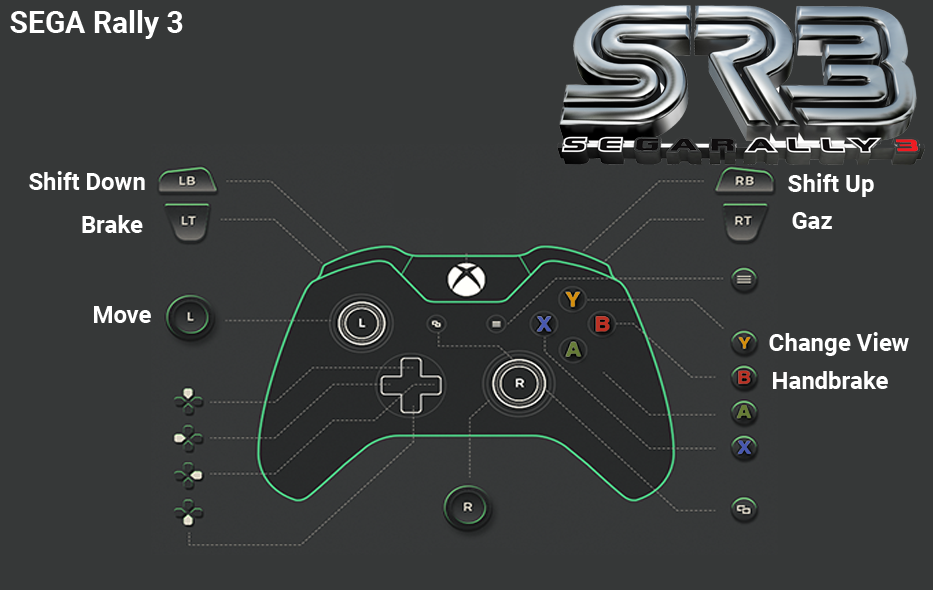
<style>
.page{position:relative;width:933px;height:590px;background:#363838}
.page>*{position:absolute;margin:0}
.t1{font:30px "Roboto-Bold";color:#ffffff}
.t2{font:24px "Roboto-Bold";color:#ffffff}
</style>
<div class="page">
<p class="t1" style="left:10px;top:10px;width:173px;height:29px">SEGA Rally 3</p>
<p class="t2" style="left:29px;top:171px;width:116px;height:19px">Shift Down</p>
<p class="t2" style="left:788px;top:173px;width:86px;height:24px">Shift Up</p>
<p class="t2" style="left:82px;top:215px;width:61px;height:18px">Brake</p>
<p class="t2" style="left:792px;top:212px;width:40px;height:17px">Gaz</p>
<p class="t2" style="left:94px;top:306px;width:57px;height:17px">Move</p>
<p class="t2" style="left:769px;top:332px;width:140px;height:24px">Change View</p>
<p class="t2" style="left:773px;top:371px;width:115px;height:18px">Handbrake</p>
</div>
